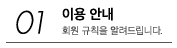
<style>
.page{position:relative;width:177px;height:48px;background:#ffffff}
.page>*{position:absolute;margin:0}
.t1{font:30px "FuturaStd-LightOblique";color:#000000}
.t2{font:14px "AppleSDGothicNeo-SemiBold";color:#000000}
.t3{font:10px "AppleSDGothicNeo-Light";color:#555555}
</style>
<div class="page">
<p class="t1" style="left:16px;top:10px;width:28px;height:24px">01</p>
<p class="t2" style="left:62px;top:7px;width:51px;height:14px">이용 안내</p>
<p class="t3" style="left:62px;top:26px;width:100px;height:9px">회원 규칙을 알려드립니다.</p>
</div>
